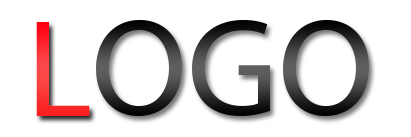
<style>
.page{position:relative;width:411px;height:137px;background:#ffffff}
.page>*{position:absolute;margin:0}
.t1{font:140px "MyriadPro-Regular"}
</style>
<div class="page">
<p class="t1" style="left:36px;top:22px;width:54px;height:94px">L</p>
<p class="t1" style="left:96px;top:20px;width:273px;height:96px">OGO</p>
</div>
